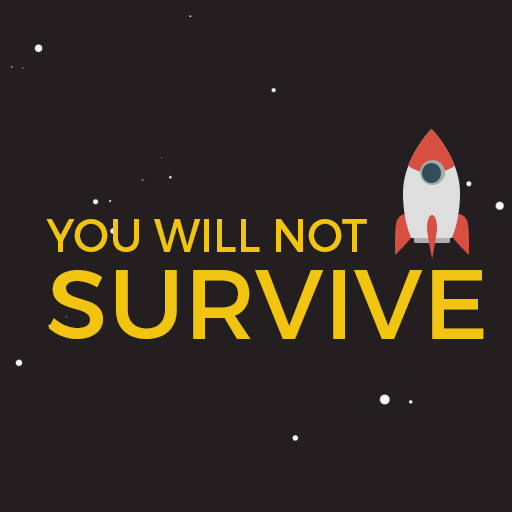
<style>
.page{position:relative;width:512px;height:512px;background:#231f20}
.page>*{position:absolute;margin:0}
.t1{font:45.8px "Montserrat-Regular";color:#f1c40f;scale:0.97 1}
.t2{font:99.2px "Montserrat-Regular";color:#f1c40f}
</style>
<div class="page">
<p class="t1" style="left:46px;top:219px;width:321px;height:33px">YOU WILL NOT</p>
<p class="t2" style="left:48px;top:270px;width:436px;height:69px">SURVIVE</p>
</div>
